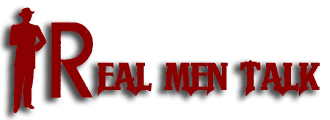
<style>
.page{position:relative;width:330px;height:120px;background:#ffffff}
.page>*{position:absolute;margin:0}
.t1{font:156px "MafiaMix";letter-spacing:-0.005em;color:#8b0000}
.t2{font:93.6px "URANIUMMAFIA";letter-spacing:-0.005em;color:#8b0000}
.t3{font:37.4px "Quinthero";letter-spacing:-0.005em;color:#8b0000}
</style>
<div class="page">
<p class="t1" style="left:9px;top:7px;width:38px;height:106px">y</p>
<p class="t2" style="left:51px;top:22px;width:42px;height:76px">r</p>
<p class="t3" style="left:97px;top:60px;width:223px;height:37px">EAL MEN TALK</p>
</div>
